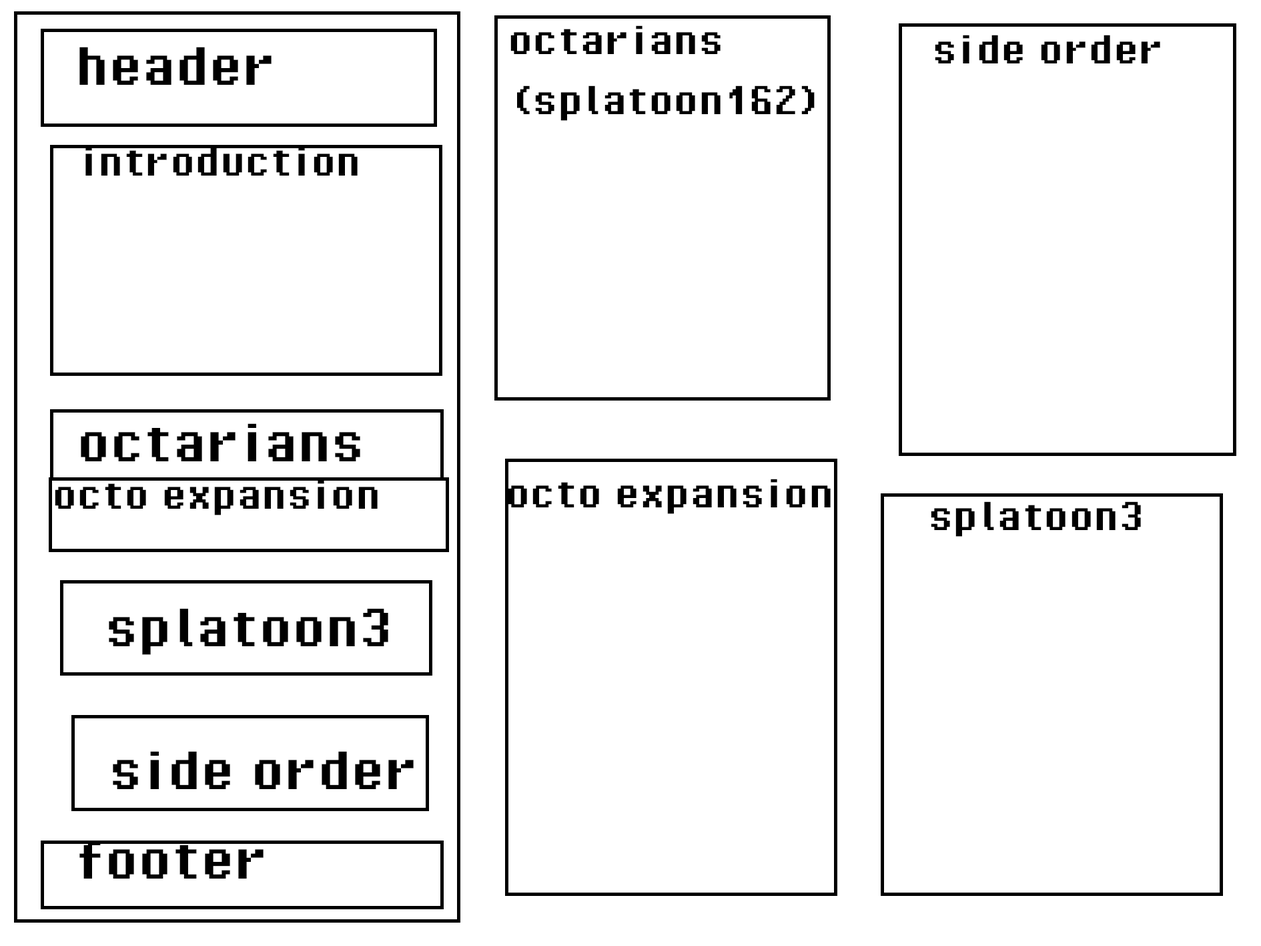
<style>
.page{position:relative;width:1261px;height:946px;background:#ffffff}
.page>*{position:absolute;margin:0}
.t1{font:50px "PixelOperator-Bold";color:#000000}
.t2{font:66.7px "PixelOperator-Bold";color:#000000}
</style>
<div class="page">
<p class="t1" style="left:510px;top:25px;width:305px;height:96px">octarians<br>(splatoon1&amp;2)</p>
<p class="t1" style="left:935px;top:35px;width:225px;height:28px">side order</p>
<p class="t2" style="left:79px;top:47px;width:193px;height:38px">header</p>
<p class="t1" style="left:85px;top:147px;width:273px;height:28px">introduction</p>
<p class="t2" style="left:81px;top:423px;width:279px;height:38px">octarians</p>
<p class="t1" style="left:55px;top:480px;width:323px;height:35px">octo expansion</p>
<p class="t1" style="left:508px;top:478px;width:323px;height:36px">octo expansion</p>
<p class="t1" style="left:931px;top:501px;width:210px;height:35px">splatoon3</p>
<p class="t2" style="left:109px;top:608px;width:279px;height:47px">splatoon3</p>
<p class="t2" style="left:113px;top:751px;width:301px;height:38px">side order</p>
<p class="t2" style="left:79px;top:840px;width:185px;height:38px">footer</p>
</div>
